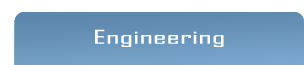
<style>
.page{position:relative;width:304px;height:65px;background:#ffffff}
.page>*{position:absolute;margin:0}
.t1{font:18px "AgencyFB-Reg";color:#ffffff;scale:2 1}
</style>
<div class="page">
<p class="t1" style="left:95px;top:29px;width:129px;height:18px">Engineering</p>
</div>
